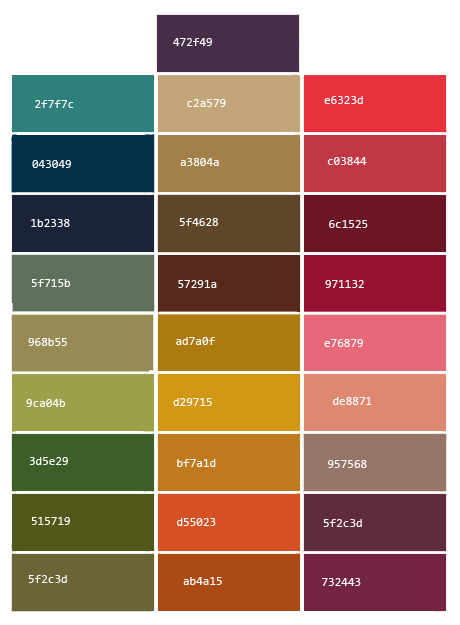
<style>
.page{position:relative;width:460px;height:625px}
.page>*{position:absolute;margin:0}
.t1{font:12px "Consolas";color:#ffffff}
.t2{font:12px "Consolas";color:#fefefe}
</style>
<div class="page">
<p class="t1" style="left:173px;top:38px;width:39px;height:8px">472f49</p>
<p class="t1" style="left:35px;top:100px;width:39px;height:8px">2f7f7c</p>
<p class="t2" style="left:187px;top:99px;width:39px;height:8px">c2a579</p>
<p class="t2" style="left:324px;top:96px;width:39px;height:8px">e6323d</p>
<p class="t2" style="left:32px;top:160px;width:39px;height:8px">043049</p>
<p class="t2" style="left:180px;top:158px;width:39px;height:8px">a3804a</p>
<p class="t2" style="left:327px;top:157px;width:40px;height:8px">c03844</p>
<p class="t2" style="left:31px;top:219px;width:39px;height:8px">1b2338</p>
<p class="t2" style="left:179px;top:218px;width:39px;height:8px">5f4628</p>
<p class="t2" style="left:329px;top:220px;width:39px;height:8px">6c1525</p>
<p class="t2" style="left:31px;top:279px;width:39px;height:8px">5f715b</p>
<p class="t2" style="left:178px;top:280px;width:39px;height:8px">57291a</p>
<p class="t2" style="left:325px;top:280px;width:39px;height:8px">971132</p>
<p class="t2" style="left:28px;top:338px;width:39px;height:8px">968b55</p>
<p class="t2" style="left:176px;top:337px;width:39px;height:8px">ad7a0f</p>
<p class="t2" style="left:324px;top:339px;width:39px;height:8px">e76879</p>
<p class="t2" style="left:26px;top:399px;width:39px;height:8px">9ca04b</p>
<p class="t2" style="left:173px;top:398px;width:39px;height:8px">d29715</p>
<p class="t2" style="left:333px;top:397px;width:39px;height:8px">de8871</p>
<p class="t2" style="left:29px;top:457px;width:39px;height:8px">3d5e29</p>
<p class="t2" style="left:177px;top:459px;width:39px;height:8px">bf7a1d</p>
<p class="t2" style="left:328px;top:460px;width:39px;height:8px">957568</p>
<p class="t1" style="left:31px;top:517px;width:39px;height:8px">515719</p>
<p class="t1" style="left:177px;top:518px;width:39px;height:8px">d55023</p>
<p class="t1" style="left:323px;top:519px;width:39px;height:8px">5f2c3d</p>
<p class="t1" style="left:28px;top:575px;width:39px;height:8px">5f2c3d</p>
<p class="t1" style="left:183px;top:577px;width:39px;height:8px">ab4a15</p>
<p class="t1" style="left:322px;top:578px;width:39px;height:8px">732443</p>
</div>
